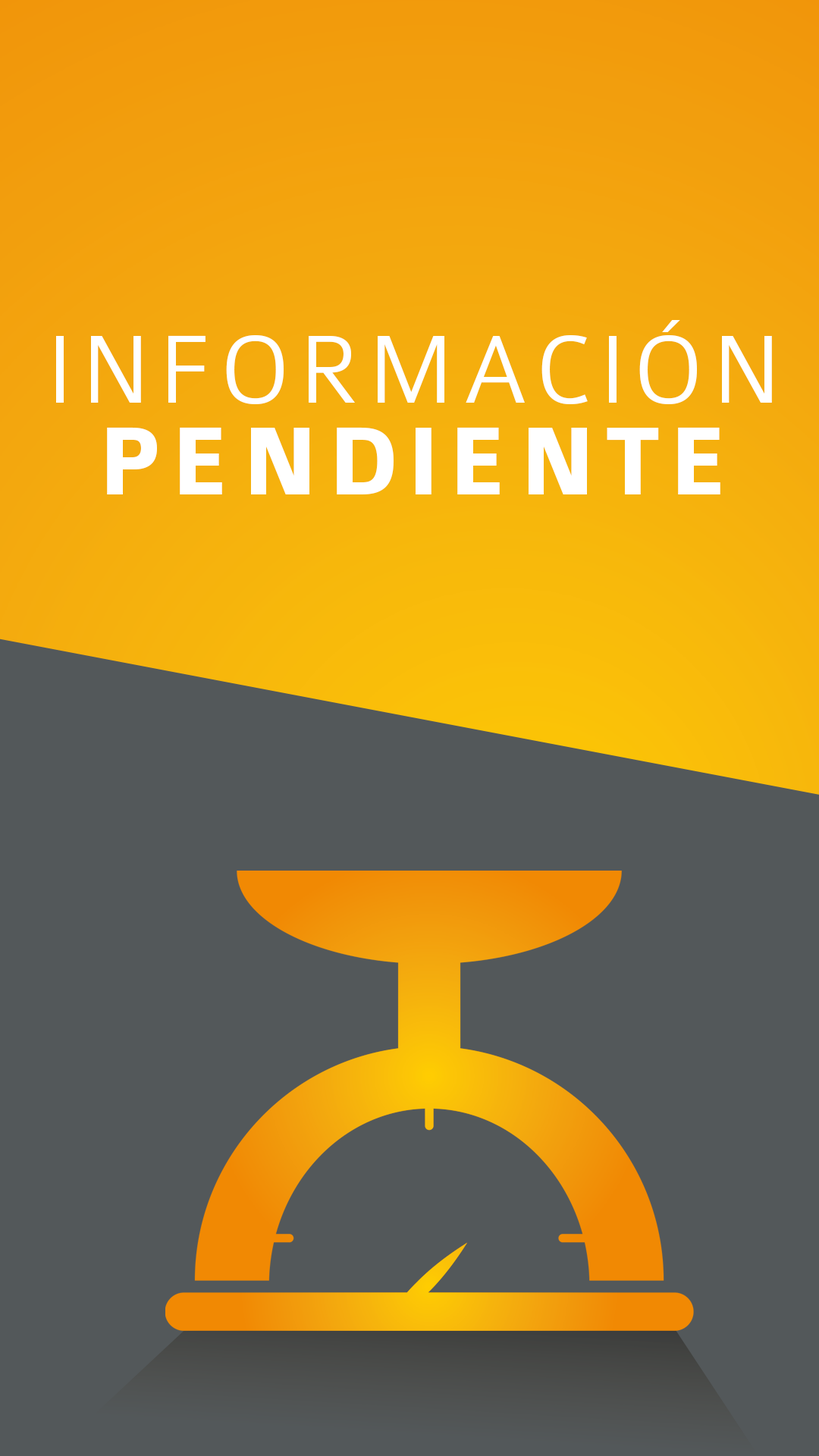
<style>
.page{position:relative;width:819px;height:1456px;background:#53585a}
.page>*{position:absolute;margin:0}
.t1{font:103.5px/92.3px "Colaborate-Light";letter-spacing:0.08em;color:#ffffff}
.t2{font:103.5px/92.3px "Colaborate-Bold";letter-spacing:0.08em;color:#ffffff}
</style>
<div class="page">
<p class="t1" style="left:56px;top:320px;width:716px;height:174px;text-align:center">INFORMACIÓN<br><span class="t2">PENDIENTE</span></p>
</div>
